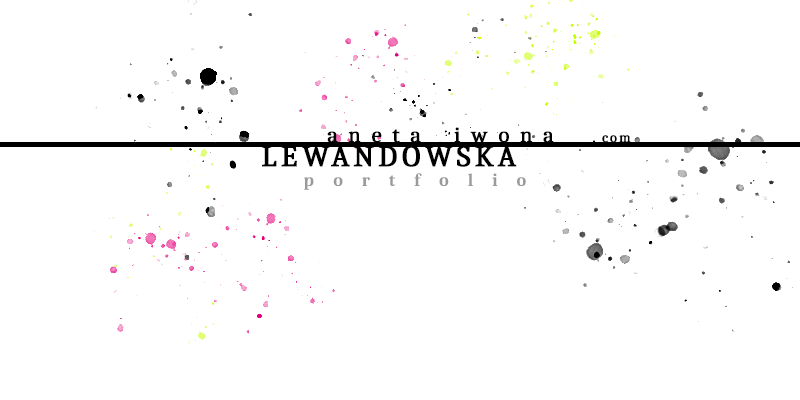
<style>
.page{position:relative;width:800px;height:400px;background:#ffffff}
.page>*{position:absolute;margin:0}
.t1{font:22px "Caladea-Regular";letter-spacing:0.1em;color:#000000;font-weight:bold}
.t2{font:14px "Caladea-Regular";letter-spacing:0.1em;color:#000000;font-weight:bold}
.t3{font:30px "Caladea-Regular";letter-spacing:0.1em;color:#000000;font-weight:bold}
.t4{font:18px "Caladea-Bold";letter-spacing:0.2em;color:#9a9a9a}
</style>
<div class="page">
<p class="t1" style="left:327px;top:127px;width:227px;height:16px">a n e t a    i w o n a</p>
<p class="t2" style="left:592px;top:135px;width:39px;height:8px">. com</p>
<p class="t3" style="left:262px;top:145px;width:255px;height:22px">LEWANDOWSKA</p>
<p class="t4" style="left:304px;top:173px;width:222px;height:17px">p  o  r  t  f  o  l  i  o</p>
</div>
